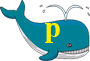
<style>
.page{position:relative;width:90px;height:61px;background:#ffffff}
.page>*{position:absolute;margin:0}
.t1{font:30px "TimesNewRomanPS-BoldMT";color:#ffed00}
</style>
<div class="page">
<p class="t1" style="left:45px;top:23px;width:15px;height:20px">p</p>
</div>
